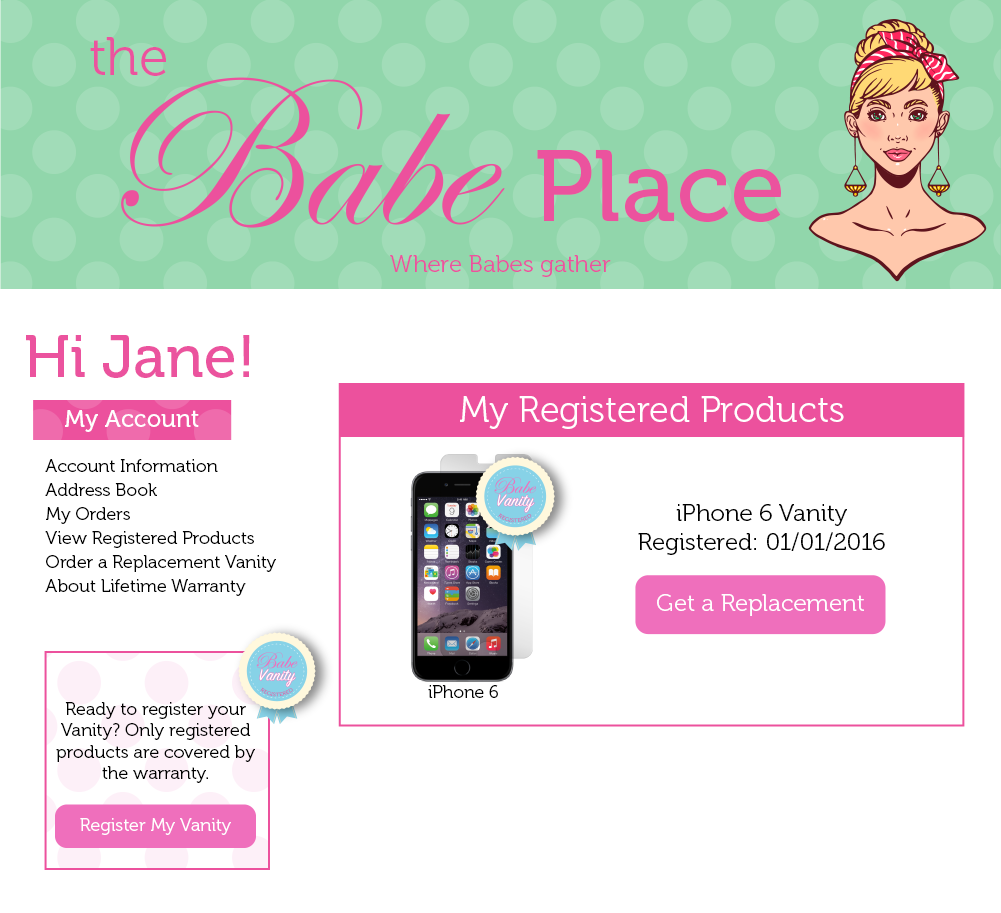
<style>
.page{position:relative;width:1001px;height:913px;background:#ffffff}
.page>*{position:absolute;margin:0}
.t1{font:53.9px "Museo-300";color:#eb539e}
.t2{font:101.2px "Museo-500";color:#eb539e}
.t3{font:24px "Museo-300";color:#eb539e}
.t4{font:60px "Museo-500";color:#eb539e}
.t5{font:36px "Museo-300";color:#ffffff}
.t6{font:24px "Museo-500";color:#ffffff}
.t7{font:18px/24px "Museo-300";color:#000000}
.t8{font:24px "Museo-300";color:#000000}
.t9{font:24px "Museo-300";color:#ffffff}
.t10{font:17.5px "Museo-300";color:#000000}
.t11{font:18px "Museo-300";color:#000000}
.t12{font:18px "Museo-300";color:#ffffff}
</style>
<div class="page">
<p class="t1" style="left:90px;top:37px;width:76px;height:39px">the</p>
<p class="t2" style="left:537px;top:149px;width:244px;height:74px">Place</p>
<p class="t3" style="left:390px;top:255px;width:221px;height:22px">Where Babes gather</p>
<p class="t4" style="left:26px;top:335px;width:224px;height:43px">Hi Jane!</p>
<p class="t5" style="left:460px;top:396px;width:384px;height:33px">My Registered Products</p>
<p class="t6" style="left:65px;top:410px;width:134px;height:22px">My Account</p>
<p class="t7" style="left:45px;top:459px;width:231px;height:137px">Account Information<br>Address Book<br>My Orders<br>View Registered Products<br>Order a Replacement Vanity<br>About Lifetime Warranty</p>
<p class="t8" style="left:638px;top:504px;width:247px;height:51px;text-align:center">iPhone 6 Vanity<br>Registered: 01/01/2016</p>
<p class="t9" style="left:657px;top:594px;width:207px;height:22px">Get a Replacement</p>
<p class="t10" style="left:428px;top:685px;width:70px;height:13px">iPhone 6</p>
<p class="t11" style="left:56px;top:702px;width:199px;height:81px;text-align:center">Ready to register your Vanity? Only registered products are covered by the warranty.</p>
<p class="t12" style="left:80px;top:818px;width:151px;height:17px">Register My Vanity</p>
</div>
